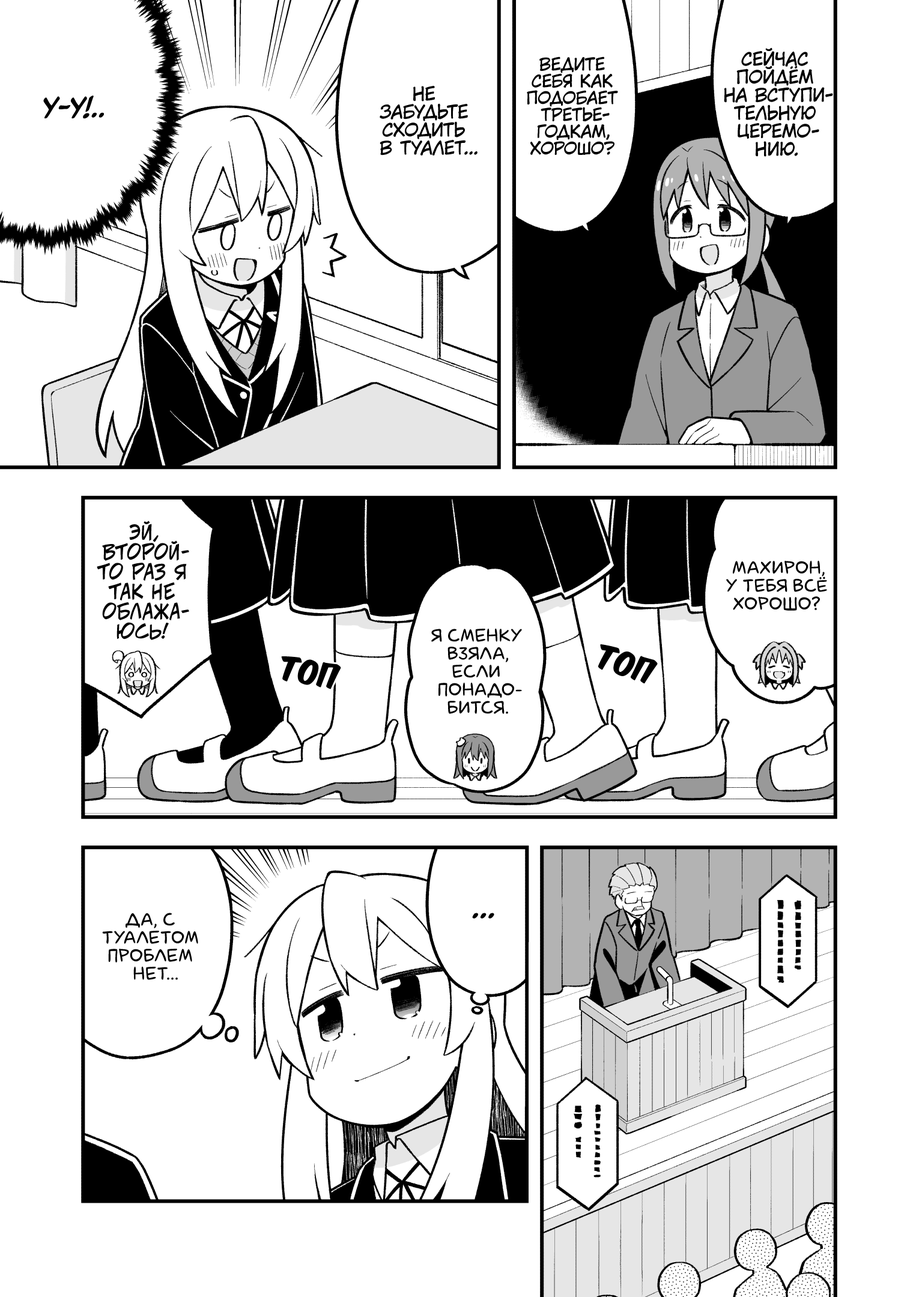
<style>
.page{position:relative;width:919px;height:1297px;background:#ffffff}
.page>*{position:absolute;margin:0}
.t1{font:18px "KuraiVoice2";color:#000000;text-transform:uppercase}
.t2{font:16.8px "KuraiVoice2";color:#000000;text-transform:uppercase}
.t3{font:24px "CCMeanwhile";color:#000000;text-transform:uppercase;font-weight:bold;font-style:italic}
.t4{font:19.8px "v_CCJeffCampbell";color:#000000;text-transform:uppercase}
.t5{font:18px "laCartoonerie";color:#000000;text-transform:uppercase}
.t6{font:28.8px "KomikaTitle-AxisRUS-LAT";color:#000000}
.t7{font:28.8px "CCMeanwhile";color:#000000;text-transform:uppercase;font-style:italic}
</style>
<div class="page">
<p class="t1" style="left:724px;top:47px;width:109px;height:110px;text-align:center">Сейчас<br>пойдём<br>на вступи-<br>тельную<br>церемо-<br>нию.</p>
<p class="t2" style="left:527px;top:56px;width:91px;height:99px;text-align:center">Ведите<br>себя как<br>подобает<br>третье-<br>годкам,<br>хорошо?</p>
<p class="t1" style="left:380px;top:86px;width:98px;height:70px;text-align:center">Не<br>забудьте<br>сходить<br>в туалет...</p>
<p class="t3" style="left:43px;top:96px;width:61px;height:23px">У-у!..</p>
<p class="t4" style="left:97px;top:521px;width:92px;height:119px;text-align:center">Эй,<br>второй-<br>то раз я<br>так не<br>облажа-<br>юсь!</p>
<p class="t5" style="left:726px;top:560px;width:101px;height:51px;text-align:center">Махирон,<br>у тебя всё<br>хорошо?</p>
<p class="t5" style="left:431px;top:628px;width:91px;height:86px;text-align:center">Я сменку<br>взяла,<br>если<br>понадо-<br>бится.</p>
<p class="t6" style="left:598px;top:645px;width:60px;height:39px;rotate:18deg">топ</p>
<p class="t6" style="left:281px;top:657px;width:60px;height:33px;rotate:10deg">топ</p>
<p class="t5" style="left:102px;top:913px;width:96px;height:67px;text-align:center">Да, с<br>туалетом<br>проблем<br>нет...</p>
<p class="t7" style="left:472px;top:913px;width:22px;height:6px">...</p>
</div>
